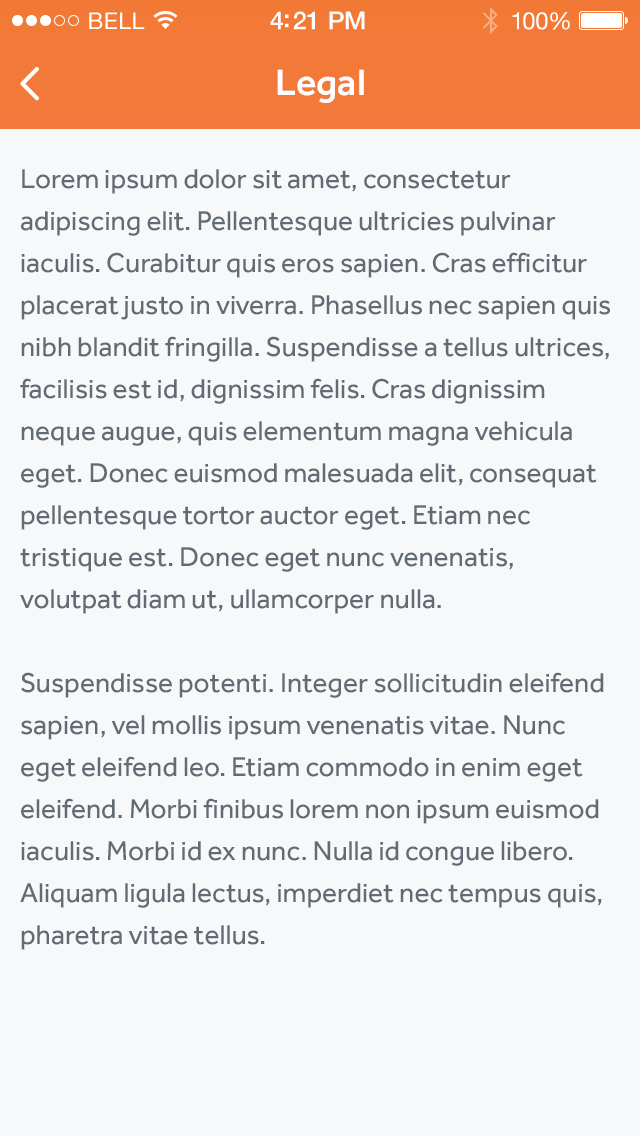
<style>
.page{position:relative;width:640px;height:1136px;background:#f6f8fa}
.page>*{position:absolute;margin:0}
.t1{font:23px "HelveticaNeue";letter-spacing:0.02em;color:#ffffff}
.t2{font:25px "HelveticaNeue-Medium";letter-spacing:-0.02em;color:#ffffff}
.t3{font:24px "HelveticaNeue";letter-spacing:-0.02em;color:#ffffff}
.t4{font:38px "Effra-Medium";color:#ffffff}
.t5{font:28px/42px "Effra-Regular";color:#626a73}
</style>
<div class="page">
<p class="t1" style="left:89px;top:12px;width:56px;height:17px">BELL</p>
<p class="t2" style="left:270px;top:11px;width:95px;height:19px">4:21 PM</p>
<p class="t3" style="left:512px;top:12px;width:58px;height:18px">100%</p>
<p class="t4" style="left:277px;top:69px;width:87px;height:34px">Legal</p>
<p class="t5" style="left:20px;top:169px;width:590px;height:781px">Lorem ipsum dolor sit amet, consectetur adipiscing elit. Pellentesque ultricies pulvinar iaculis. Curabitur quis eros sapien. Cras efficitur placerat justo in viverra. Phasellus nec sapien quis nibh blandit fringilla. Suspendisse a tellus ultrices, facilisis est id, dignissim felis. Cras dignissim neque augue, quis elementum magna vehicula eget. Donec euismod malesuada elit, consequat pellentesque tortor auctor eget. Etiam nec tristique est. Donec eget nunc venenatis, volutpat diam ut, ullamcorper nulla.<br><br>Suspendisse potenti. Integer sollicitudin eleifend sapien, vel mollis ipsum venenatis vitae. Nunc eget eleifend leo. Etiam commodo in enim eget eleifend. Morbi finibus lorem non ipsum euismod iaculis. Morbi id ex nunc. Nulla id congue libero. Aliquam ligula lectus, imperdiet nec tempus quis, pharetra vitae tellus.</p>
</div>
